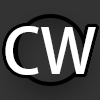
<style>
.page{position:relative;width:100px;height:100px}
.page>*{position:absolute;margin:0}
.t1{font:60.8px "AdobeFanHeitiStd-Bold";color:#ffffff}
</style>
<div class="page">
<p class="t1" style="left:5px;top:26px;width:91px;height:49px">CWWW</p>
</div>
